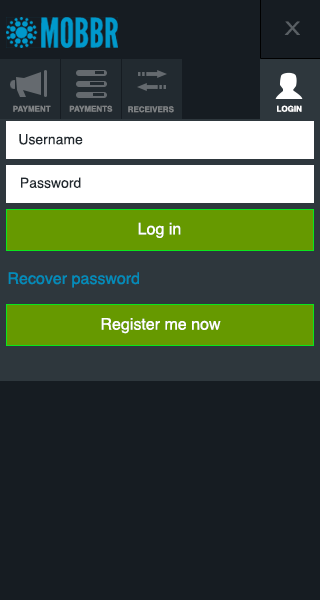
<style>
.page{position:relative;width:320px;height:600px;background:#161c22}
.page>*{position:absolute;margin:0}
.t1{font:9.3px "ArialNarrow";color:#595f64;scale:1.52 1}
.t2{font:8px "Helvetica-Bold";color:#7f8284}
.t3{font:8px "Helvetica-Bold";color:#ffffff}
.t4{font:14px "Helvetica";color:#222a30}
.t5{font:16px "Helvetica";color:#ffffff}
.t6{font:16px "Helvetica";color:#028cba}
</style>
<div class="page">
<p class="t1" style="left:284px;top:21px;width:16px;height:14px">X</p>
<p class="t2" style="left:13px;top:105px;width:38px;height:7px">PAYMENT</p>
<p class="t2" style="left:69px;top:105px;width:44px;height:7px">PAYMENTS</p>
<p class="t2" style="left:128px;top:106px;width:46px;height:7px">RECEIVERS</p>
<p class="t3" style="left:277px;top:105px;width:25px;height:7px">LOGIN</p>
<p class="t4" style="left:19px;top:134px;width:64px;height:11px">Username</p>
<p class="t4" style="left:21px;top:177px;width:60px;height:12px">Password</p>
<p class="t5" style="left:138px;top:222px;width:43px;height:16px">Log in</p>
<p class="t6" style="left:8px;top:272px;width:131px;height:16px">Recover password</p>
<p class="t5" style="left:101px;top:318px;width:120px;height:16px">Register me now</p>
</div>
